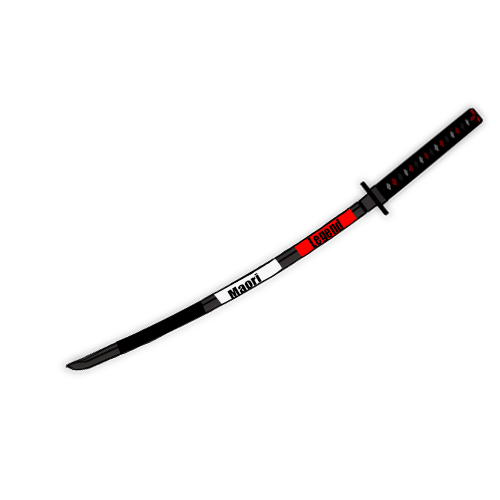
<style>
.page{position:relative;width:500px;height:500px;background:#ffffff}
.page>*{position:absolute;margin:0}
.t1{font:15.4px "Impact";color:#000000;scale:0.82 1}
.t2{font:12.3px "Impact";color:#000000;scale:1.23 1}
</style>
<div class="page">
<p class="t1" style="left:307px;top:218px;width:38px;height:31px;rotate:-33deg">Legend</p>
<p class="t2" style="left:227px;top:272px;width:35px;height:28px;rotate:-31deg">Maori</p>
</div>
